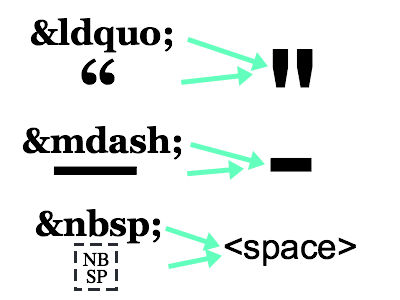
<style>
.page{position:relative;width:400px;height:300px;background:#ffffff}
.page>*{position:absolute;margin:0}
.t1{font:35px "Georgia-Bold";color:#000000}
.t2{font:150px "ArialMT";color:#000000}
.t3{font:75px "Georgia-Bold";color:#000000}
.t4{font:150.2px "ArialMT";color:#000000}
.t5{font:100px "Georgia-Bold";color:#000000}
.t6{font:35px "ArialMT";color:#000000}
.t7{font:19.2px/17.1px "Times-Roman";color:#000000}
</style>
<div class="page">
<p class="t1" style="left:30px;top:18px;width:143px;height:35px">&amp;ldquo;</p>
<p class="t2" style="left:272px;top:49px;width:41px;height:39px">"</p>
<p class="t3" style="left:81px;top:58px;width:34px;height:27px">“</p>
<p class="t1" style="left:22px;top:126px;width:160px;height:34px">&amp;mdash;</p>
<p class="t4" style="left:270px;top:157px;width:42px;height:15px">-</p>
<p class="t5" style="left:53px;top:166px;width:84px;height:9px">—</p>
<p class="t1" style="left:35px;top:209px;width:126px;height:35px">&amp;nbsp;</p>
<p class="t6" style="left:224px;top:237px;width:132px;height:29px">&lt;space&gt;</p>
<p class="t7" style="left:82px;top:252px;width:27px;height:32px;text-align:center">NB<br>SP</p>
</div>
